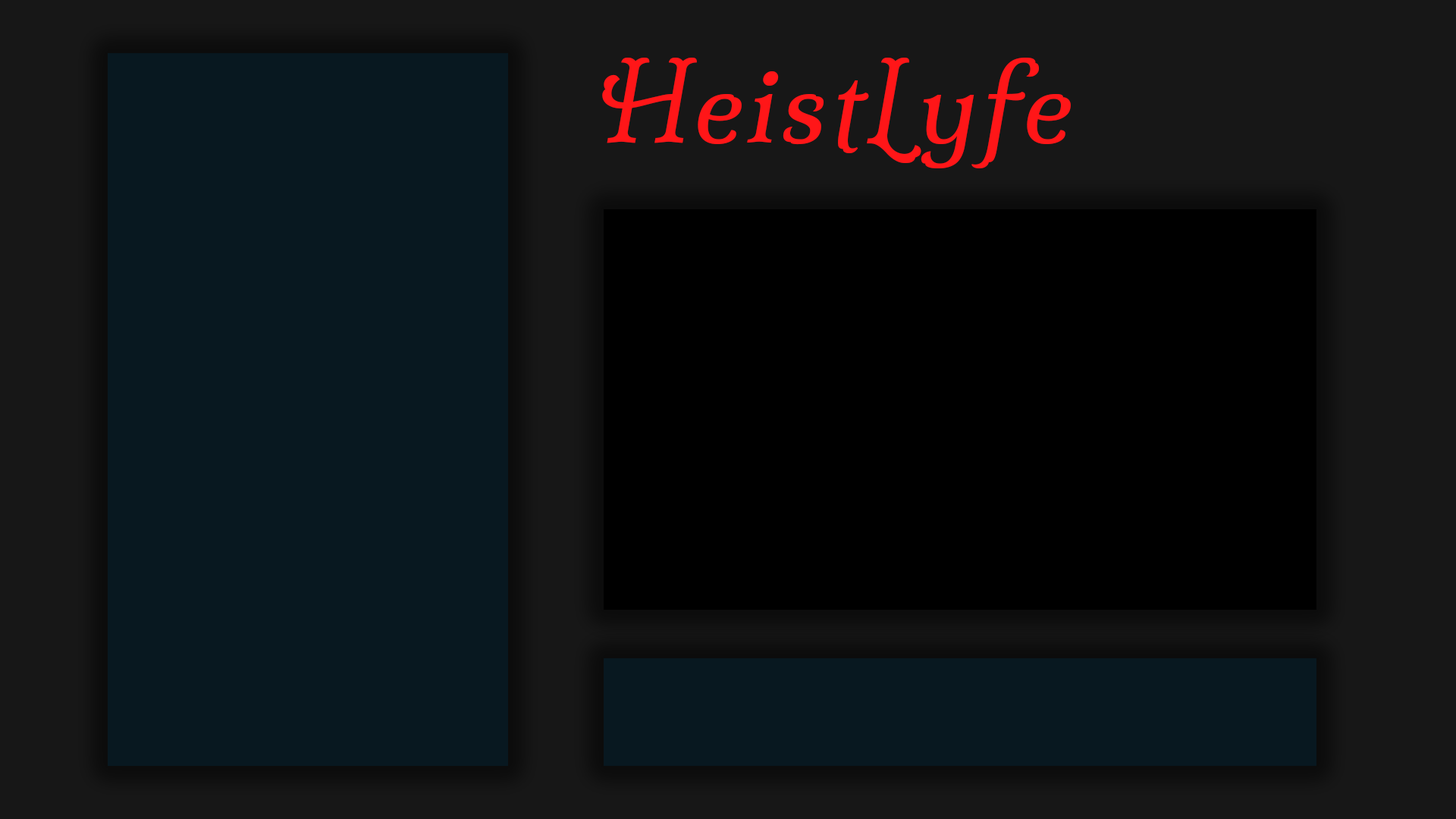
<style>
.page{position:relative;width:1456px;height:819px;background:#081820}
.page>*{position:absolute;margin:0}
.t1{font:104px "Milonga-Regular";letter-spacing:0.04em;color:#ff1618;font-style:italic}
</style>
<div class="page">
<p class="t1" style="left:602px;top:58px;width:469px;height:110px">HeistLyfe</p>
</div>
